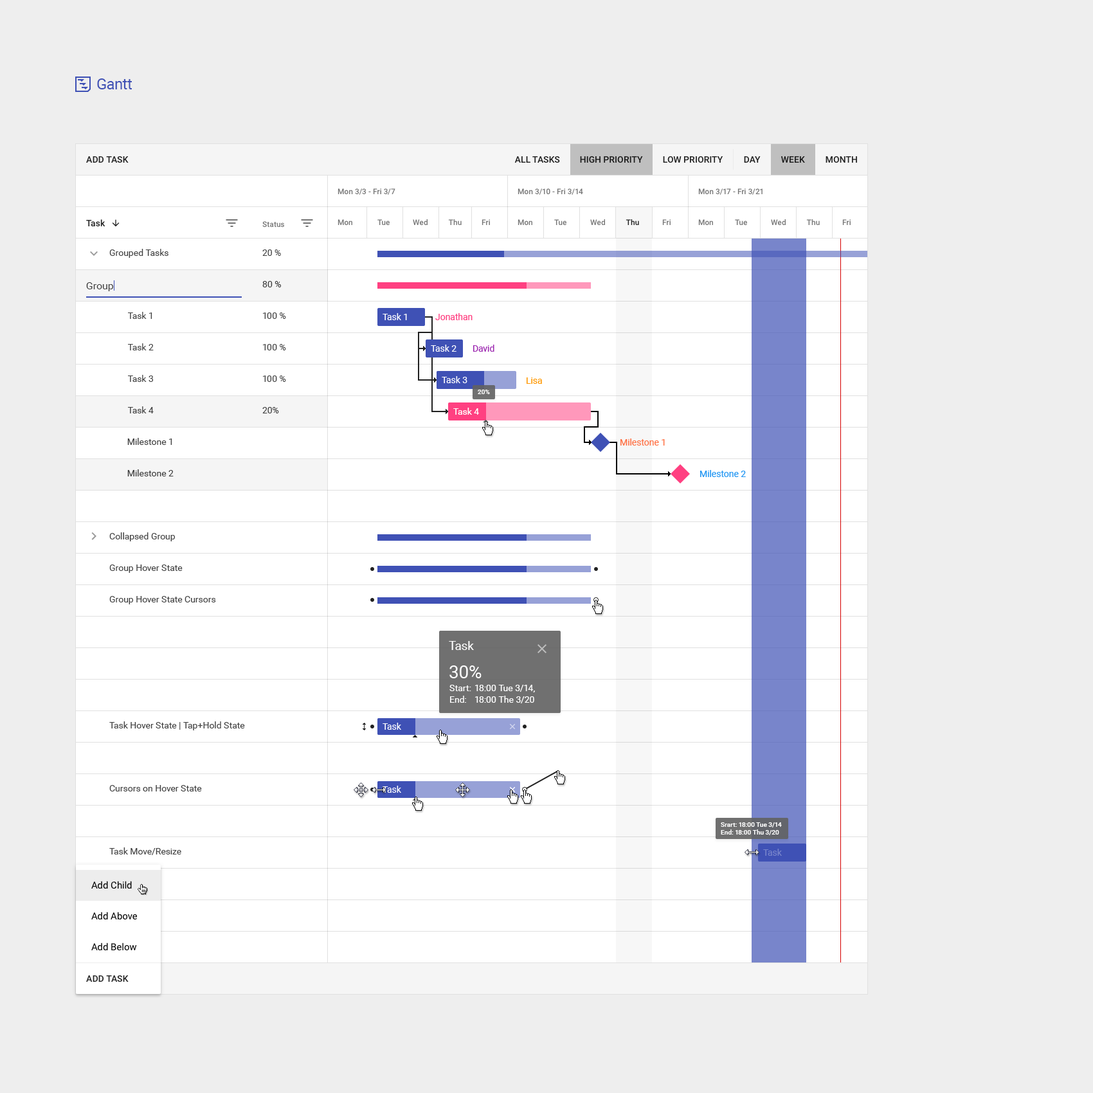
<style>
.page{position:relative;width:1093px;height:1093px;background:#eeeeee}
.page>*{position:absolute;margin:0}
.t1{font:15.4px "Roboto-Regular";letter-spacing:-0.025em;color:#3f51b5}
.t2{font:9px "Roboto-Medium";color:#202020;text-transform:uppercase}
.t3{font:9px "Roboto-Medium";color:#191919;text-transform:uppercase}
.t4{font:7.7px "Roboto-Medium";color:#757575}
.t5{font:9px "Roboto-Medium";color:#222222}
.t6{font:7.7px "Roboto-Medium";color:#767676}
.t7{font:7.7px "Roboto-Medium";color:#202020}
.t8{font:9px/31.5px "Roboto-Regular";color:#404040}
.t9{font:10.3px "Roboto-Regular";color:#3d3d3d}
.t10{font:9px "Roboto-Regular";color:#ffffff}
.t11{font:9px "Roboto-Regular";color:#ff4081}
.t12{font:9px "Roboto-Regular";color:#9c27b0}
.t13{font:9px "Roboto-Regular";color:#ff9800}
.t14{font:6.4px "Roboto-Medium";color:#ffffff}
.t15{font:9px "Roboto-Regular";color:#ff7043}
.t16{font:9px "Roboto-Regular";color:#2196f3}
.t17{font:12.2px "Roboto-Regular";color:#ffffff}
.t18{font:18px "Roboto-Regular";color:#ffffff}
.t19{font:9px/11.6px "Roboto-Regular";color:#ffffff}
.t20{font:9px "Roboto-Regular";color:#7885cb}
.t21{font:9.6px/30.9px "Roboto-Regular";color:#000000}
.t22{font:9px "Roboto-Medium";color:#212121;text-transform:uppercase}
</style>
<div class="page">
<p class="t1" style="left:97px;top:78px;width:35px;height:11px">Gantt</p>
<p class="t2" style="left:86px;top:156px;width:43px;height:7px">add task</p>
<p class="t2" style="left:514px;top:156px;width:46px;height:7px">all tasks</p>
<p class="t3" style="left:580px;top:156px;width:63px;height:7px">high priority</p>
<p class="t2" style="left:663px;top:156px;width:60px;height:7px">low priority</p>
<p class="t2" style="left:744px;top:156px;width:16px;height:7px">DAY</p>
<p class="t3" style="left:781px;top:156px;width:24px;height:7px">week</p>
<p class="t2" style="left:825px;top:156px;width:32px;height:7px">month</p>
<p class="t4" style="left:338px;top:188px;width:57px;height:7px">Mon 3/3 - Fri 3/7</p>
<p class="t4" style="left:518px;top:188px;width:65px;height:7px">Mon 3/10 - Fri 3/14</p>
<p class="t4" style="left:698px;top:188px;width:64px;height:7px">Mon 3/17 - Fri 3/21</p>
<p class="t5" style="left:86px;top:219px;width:19px;height:8px">Task</p>
<p class="t6" style="left:262px;top:221px;width:22px;height:7px">Status</p>
<p class="t4" style="left:338px;top:219px;width:14px;height:7px">Mon</p>
<p class="t4" style="left:377px;top:219px;width:13px;height:7px">Tue</p>
<p class="t4" style="left:413px;top:219px;width:15px;height:7px">Wed</p>
<p class="t4" style="left:448px;top:219px;width:14px;height:6px">Thu</p>
<p class="t4" style="left:482px;top:219px;width:8px;height:6px">Fri</p>
<p class="t4" style="left:518px;top:219px;width:14px;height:7px">Mon</p>
<p class="t4" style="left:554px;top:219px;width:12px;height:7px">Tue</p>
<p class="t4" style="left:590px;top:219px;width:15px;height:7px">Wed</p>
<p class="t7" style="left:626px;top:219px;width:13px;height:6px">Thu</p>
<p class="t4" style="left:662px;top:219px;width:8px;height:6px">Fri</p>
<p class="t4" style="left:698px;top:219px;width:15px;height:7px">Mon</p>
<p class="t4" style="left:735px;top:219px;width:12px;height:7px">Tue</p>
<p class="t4" style="left:771px;top:219px;width:15px;height:7px">Wed</p>
<p class="t4" style="left:806px;top:219px;width:14px;height:6px">Thu</p>
<p class="t4" style="left:842px;top:219px;width:9px;height:6px">Fri</p>
<p class="t8" style="left:109px;top:249px;width:136px;height:606px">Grouped Tasks<br>      <br>         Task 1<br>         Task 2<br>         Task 3<br>         Task 4<br>        Milestone 1<br>        Milestone 2<br><br>Collapsed Group<br>Group Hover State<br>Group Hover State Cursors<br><br><br><br>Task Hover State | Tap+Hold State<br><br>Cursors on Hover State<br><br>Task Move/Resize</p>
<p class="t8" style="left:262px;top:249px;width:24px;height:164px">20 %<br>80 %<br>100 %<br>100 %<br>100 %<br>20%</p>
<p class="t9" style="left:86px;top:282px;width:28px;height:9px">Group</p>
<p class="t10" style="left:382px;top:313px;width:25px;height:7px">Task 1</p>
<p class="t11" style="left:435px;top:313px;width:38px;height:7px">Jonathan</p>
<p class="t10" style="left:431px;top:345px;width:25px;height:7px">Task 2</p>
<p class="t12" style="left:473px;top:345px;width:21px;height:7px">David</p>
<p class="t10" style="left:442px;top:376px;width:25px;height:7px">Task 3</p>
<p class="t13" style="left:526px;top:377px;width:16px;height:7px">Lisa</p>
<p class="t14" style="left:478px;top:390px;width:12px;height:4px">20%</p>
<p class="t10" style="left:453px;top:408px;width:26px;height:7px">Task 4</p>
<p class="t15" style="left:620px;top:438px;width:45px;height:8px">Milestone 1</p>
<p class="t16" style="left:700px;top:470px;width:46px;height:7px">Milestone 2</p>
<p class="t17" style="left:449px;top:641px;width:25px;height:9px">Task</p>
<p class="t18" style="left:449px;top:665px;width:33px;height:13px">30%</p>
<p class="t19" style="left:449px;top:685px;width:22px;height:18px">Start:<br>End:</p>
<p class="t19" style="left:475px;top:685px;width:60px;height:18px">18:00 Tue 3/14,<br>18:00 The 3/20</p>
<p class="t10" style="left:382px;top:723px;width:19px;height:7px">Task</p>
<p class="t10" style="left:382px;top:786px;width:19px;height:7px">Task</p>
<p class="t14" style="left:721px;top:822px;width:61px;height:13px">Srart: 18:00 Tue 3/14<br>End: 18:00 Thu 3/20</p>
<p class="t20" style="left:763px;top:849px;width:19px;height:7px">Task</p>
<p class="t21" style="left:91px;top:881px;width:46px;height:70px">Add Child<br>Add Above<br>Add Below</p>
<p class="t22" style="left:86px;top:975px;width:43px;height:7px">add task</p>
</div>
